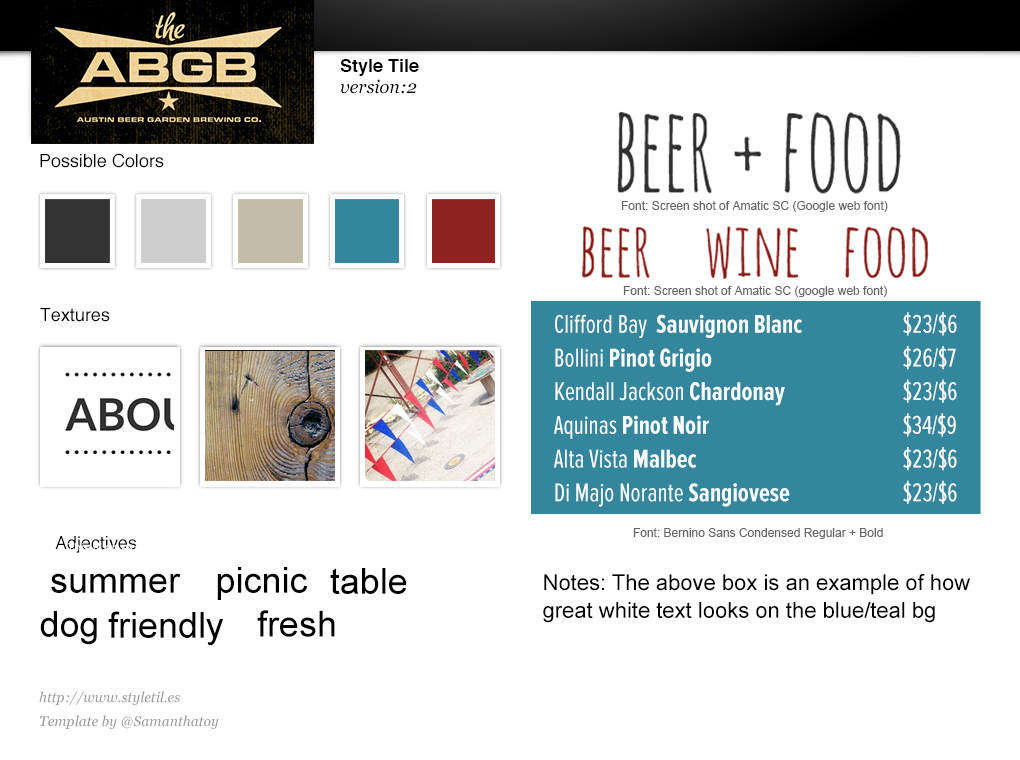
<style>
.page{position:relative;width:1020px;height:760px;background:#ffffff}
.page>*{position:absolute;margin:0}
.t1{font:18px "Helvetica-Bold";color:#000000}
.t2{font:18px "Georgia-Italic";color:#000000}
.t3{font:18px "Helvetica";color:#000000}
.t4{font:12px "ArialMT";color:#666666}
.t5{font:26.7px/33.7px "ProximaNovaExCn-Regular";color:#f9fafa}
.t6{font:26.7px/33.7px "ProximaNovaExCn-Bold";color:#f9fafa}
.t7{font:36px "ArialMT";color:#000000}
.t8{font:22px/27.8px "ArialMT";color:#020202}
.t9{font:14px/24px "Georgia-Italic";color:#999999}
</style>
<div class="page">
<p class="t1" style="left:340px;top:59px;width:79px;height:17px">Style Tile</p>
<p class="t2" style="left:340px;top:79px;width:77px;height:15px">version:2</p>
<p class="t3" style="left:40px;top:153px;width:124px;height:15px">Possible Colors</p>
<p class="t4" style="left:621px;top:201px;width:267px;height:11px">Font: Screen shot of Amatic SC (Google web font)</p>
<p class="t4" style="left:623px;top:286px;width:264px;height:11px">Font: Screen shot of Amatic SC (google web font)</p>
<p class="t3" style="left:40px;top:308px;width:70px;height:14px">Textures</p>
<p class="t5" style="left:554px;top:312px;width:403px;height:195px">Clifford Bay  <span class="t6">Sauvignon Blanc </span>   $23/$6<br>Bollini <span class="t6">Pinot Grigio </span>     $26/$7<br>Kendall Jackson <span class="t6">Chardonay</span>    $23/$6<br>Aquinas <span class="t6">Pinot Noir</span>      $34/$9<br>Alta Vista <span class="t6">Malbec</span>      $23/$6<br>Di Majo Norante <span class="t6">Sangiovese</span>   $23/$6</p>
<p class="t4" style="left:633px;top:528px;width:250px;height:11px">Font: Bernino Sans Condensed Regular + Bold</p>
<p class="t3" style="left:55px;top:536px;width:82px;height:17px">Adjectives</p>
<p class="t7" style="left:217px;top:567px;width:91px;height:33px">picnic</p>
<p class="t7" style="left:330px;top:568px;width:77px;height:26px">table</p>
<p class="t7" style="left:51px;top:573px;width:130px;height:20px">summer</p>
<p class="t8" style="left:543px;top:574px;width:427px;height:49px">Notes: The above box is an example of how<br>great white text looks on the blue/teal bg</p>
<p class="t7" style="left:40px;top:611px;width:57px;height:34px">dog</p>
<p class="t7" style="left:108px;top:611px;width:116px;height:35px">friendly</p>
<p class="t7" style="left:257px;top:610px;width:78px;height:27px">fresh</p>
<p class="t9" style="left:39px;top:691px;width:180px;height:38px">http://www.styletil.es<br>Template by @Samanthatoy</p>
</div>
